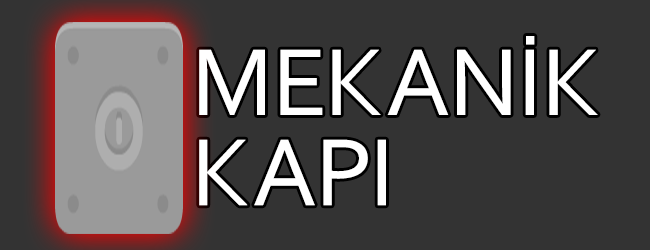
<style>
.page{position:relative;width:650px;height:250px;background:#333333}
.page>*{position:absolute;margin:0}
.t1{font:100px/90px "Corbel";color:#ffffff}
</style>
<div class="page">
<p class="t1" style="left:199px;top:36px;width:399px;height:170px">MEKANİK<br>KAPI</p>
</div>
